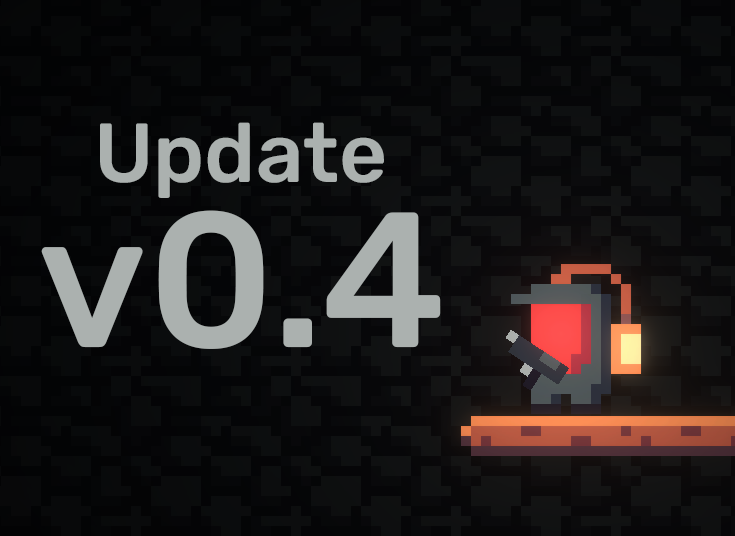
<style>
.page{position:relative;width:735px;height:536px}
.page>*{position:absolute;margin:0}
.t1{font:83.6px "Rubik-Medium";color:#abb1af}
.t2{font:192.1px "Rubik-Medium";color:#abb1af}
</style>
<div class="page">
<p class="t1" style="left:100px;top:122px;width:284px;height:76px">Update</p>
<p class="t2" style="left:41px;top:210px;width:400px;height:139px">v0.4</p>
</div>
